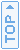
<style>
.page{position:relative;width:20px;height:50px;background:#f3f7fb}
.page>*{position:absolute;margin:0}
.t1{font:14px "Arial-BoldMT";color:#6eaae5}
</style>
<div class="page">
<p class="t1" style="left:3px;top:15px;width:17px;height:28px;rotate:-90deg">TOP</p>
</div>
